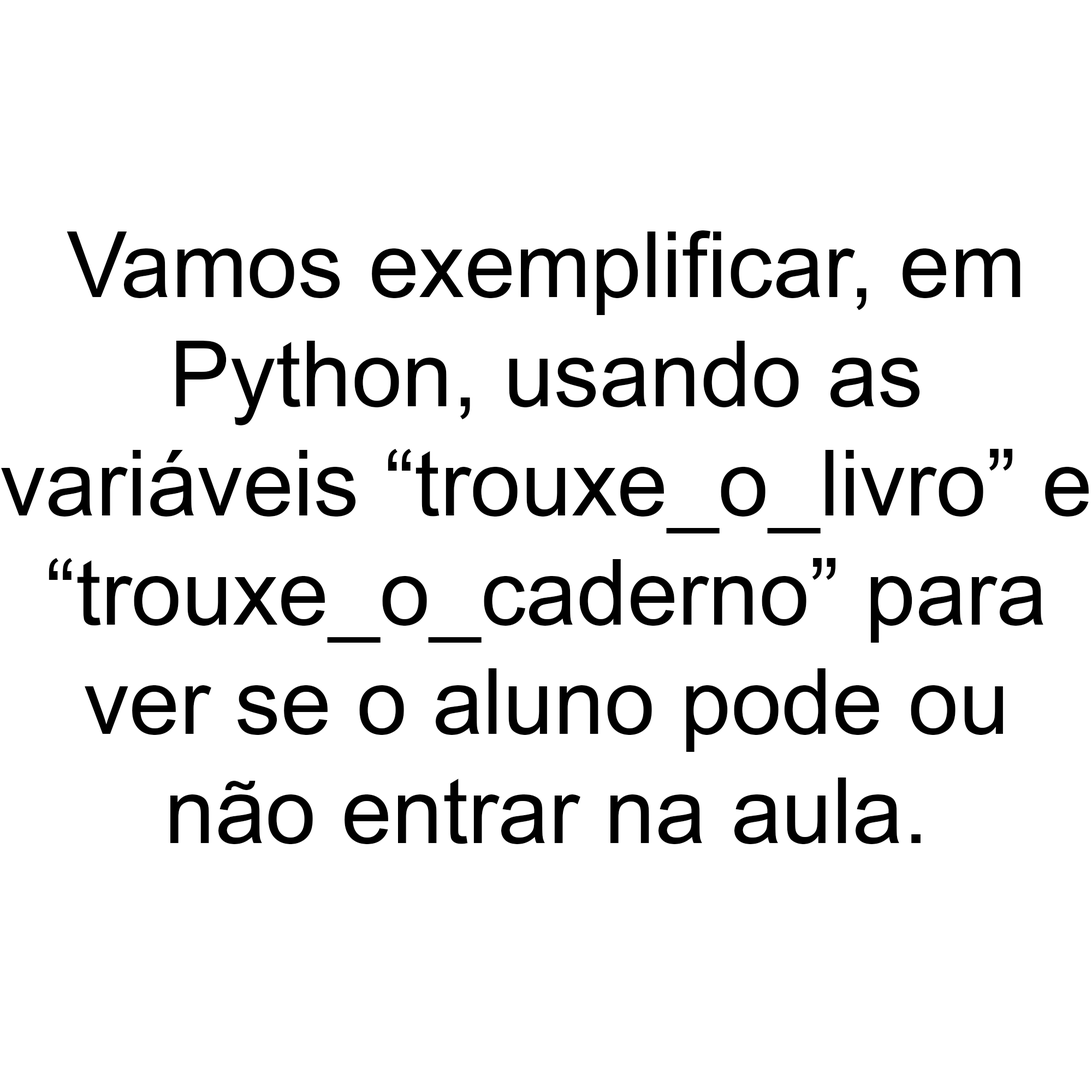
<style>
.page{position:relative;width:1092px;height:1092px;background:#ffffff}
.page>*{position:absolute;margin:0}
.t1{font:91px "ArialMT";color:#000000}
</style>
<div class="page">
<p class="t1" style="left:1px;top:230px;width:1088px;height:614px;text-align:center">Vamos exemplificar, em<br>Python, usando as<br>variáveis “trouxe_o_livro” e<br>“trouxe_o_caderno” para<br>ver se o aluno pode ou<br>não entrar na aula.</p>
</div>
